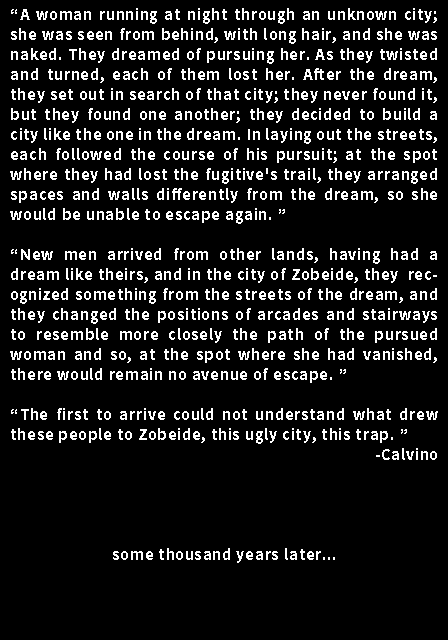
<style>
.page{position:relative;width:448px;height:640px;background:#000000}
.page>*{position:absolute;margin:0}
.t1{font:16.7px "SourceSansPro-Bold";letter-spacing:0.05em;color:#ffffff}
</style>
<div class="page">
<p class="t1" style="left:10px;top:8px;width:428px;height:555px;text-align:justify">“A woman running at night through an unknown city; she was seen from behind, with long hair, and she was naked. They dreamed of pursuing her. As they twisted and turned, each of them lost her. After the dream, they set out in search of that city; they never found it, but they found one another; they decided to build a city like the one in the dream. In laying out the streets, each followed the course of his pursuit; at the spot where they had lost the fugitive's trail, they arranged spaces and walls differently from the dream, so she would be unable to escape again. ”<br><br>“New men arrived from other lands, having had a dream like theirs, and in the city of Zobeide, they  recognized something from the streets of the dream, and they changed the positions of arcades and stairways to resemble more closely the path of the pursued woman and so, at the spot where she had vanished, there would remain no avenue of escape. ”<br><br>“The first to arrive could not understand what drew these people to Zobeide, this ugly city, this trap. ”<br>-Calvino<br><br><br><br><br>some thousand years later...</p>
</div>
